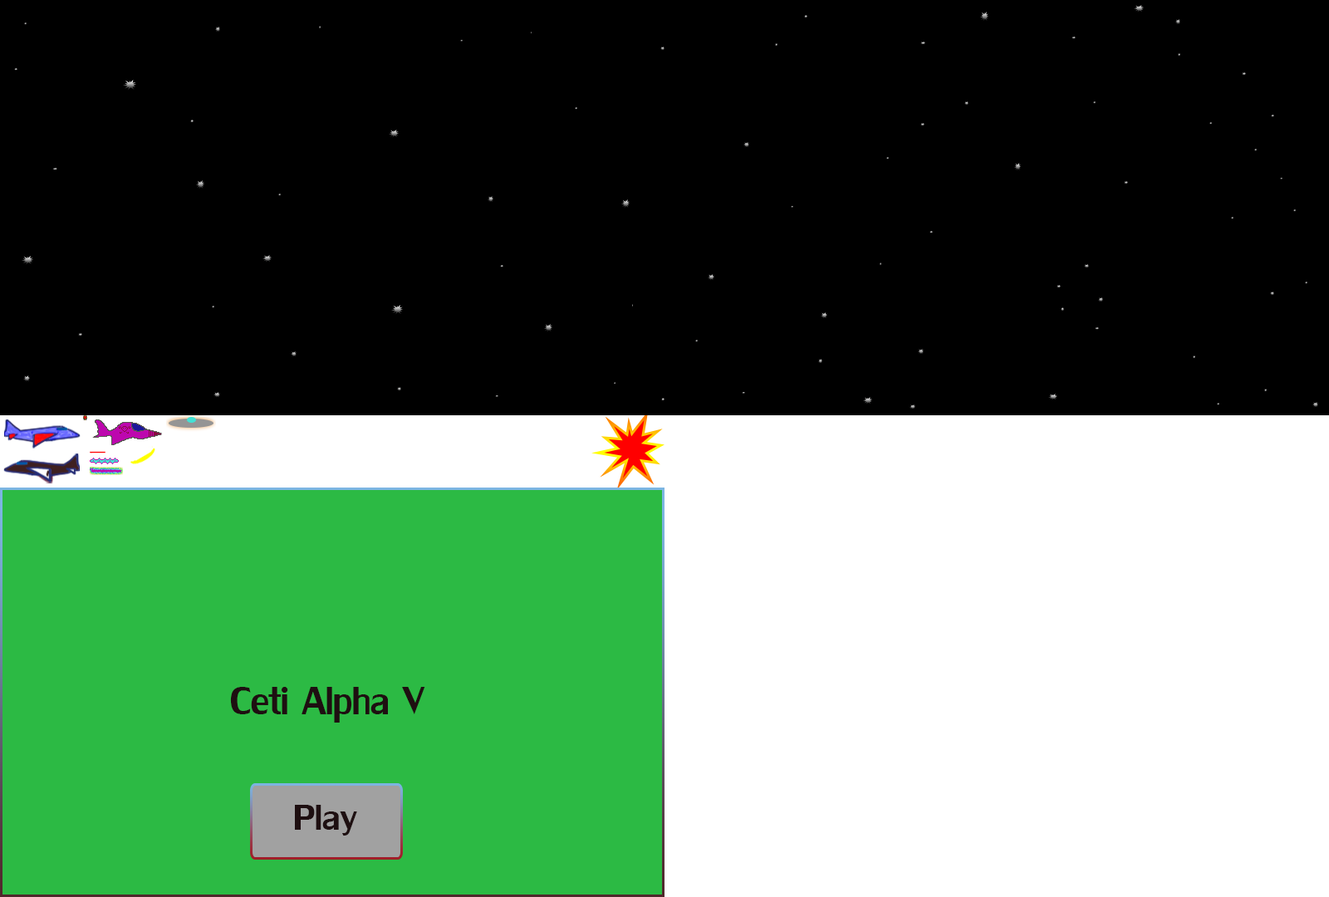
<style>
.page{position:relative;width:1329px;height:897px;background:#000000}
.page>*{position:absolute;margin:0}
.t1{font:59.8px "LilyUPC";color:#1e0f11;scale:0.93 1}
.t2{font:53.8px "LilyUPC";color:#1e0f11}
</style>
<div class="page">
<p class="t1" style="left:230px;top:687px;width:195px;height:36px">Ceti Alpha V</p>
<p class="t2" style="left:295px;top:805px;width:62px;height:31px">Play</p>
</div>
